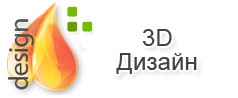
<style>
.page{position:relative;width:238px;height:98px;background:#ffffff}
.page>*{position:absolute;margin:0}
.t1{font:24px/24px "ArialMT";letter-spacing:0.005em;color:#424344}
</style>
<div class="page">
<p class="t1" style="left:116px;top:29px;width:81px;height:45px;text-align:center">3D<br>Дизайн</p>
</div>
